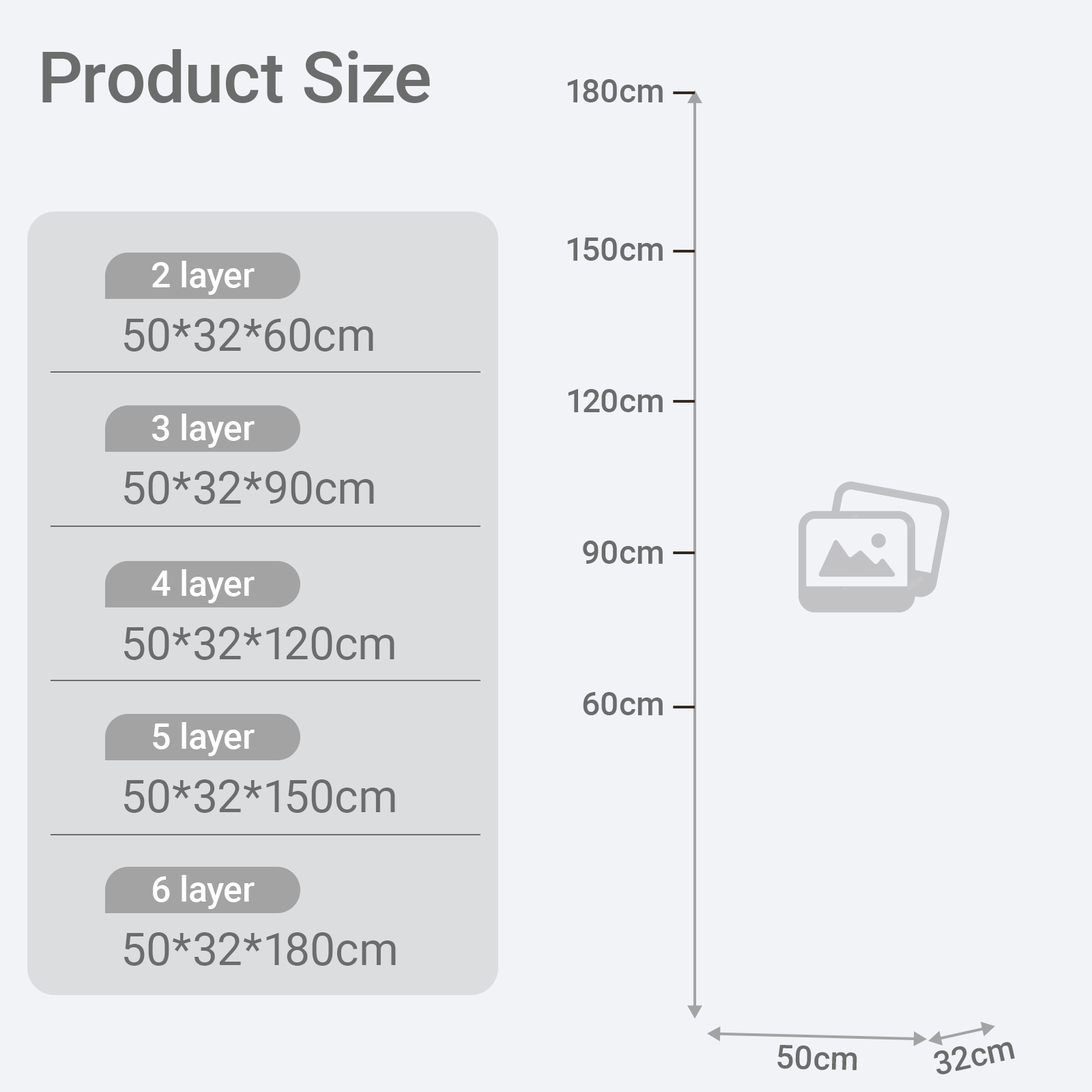
<style>
.page{position:relative;width:1092px;height:1092px;background:#f2f3f6}
.page>*{position:absolute;margin:0}
.t1{font:71px "Roboto-Medium";color:#6c6c6c}
.t2{font:32.8px "Roboto-Medium";color:#6c6c6c}
.t3{font:35.5px "Roboto-Medium";color:#ffffff}
.t4{font:45.1px "Roboto-Regular";color:#6c6c6c}
</style>
<div class="page">
<p class="t1" style="left:42px;top:49px;width:388px;height:54px">Product Size</p>
<p class="t2" style="left:567px;top:79px;width:96px;height:23px">180cm</p>
<p class="t2" style="left:567px;top:238px;width:96px;height:23px">150cm</p>
<p class="t3" style="left:152px;top:261px;width:103px;height:34px">2 layer</p>
<p class="t4" style="left:124px;top:318px;width:249px;height:33px">50*32*60cm</p>
<p class="t2" style="left:568px;top:389px;width:95px;height:23px">120cm</p>
<p class="t3" style="left:152px;top:414px;width:103px;height:34px">3 layer</p>
<p class="t4" style="left:124px;top:471px;width:250px;height:33px">50*32*90cm</p>
<p class="t2" style="left:583px;top:541px;width:80px;height:23px">90cm</p>
<p class="t3" style="left:152px;top:569px;width:103px;height:34px">4 layer</p>
<p class="t4" style="left:124px;top:627px;width:270px;height:33px">50*32*120cm</p>
<p class="t2" style="left:583px;top:692px;width:80px;height:23px">60cm</p>
<p class="t3" style="left:153px;top:722px;width:102px;height:34px">5 layer</p>
<p class="t4" style="left:124px;top:779px;width:271px;height:34px">50*32*150cm</p>
<p class="t3" style="left:153px;top:875px;width:102px;height:34px">6 layer</p>
<p class="t4" style="left:124px;top:932px;width:272px;height:34px">50*32*180cm</p>
<p class="t2" style="left:777px;top:1045px;width:80px;height:25px;rotate:1deg">50cm</p>
<p class="t2" style="left:934px;top:1041px;width:81px;height:33px;rotate:-13deg">32cm</p>
</div>
